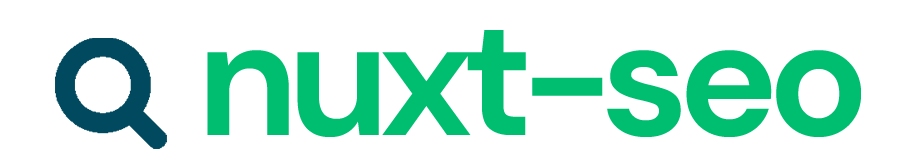
<style>
.page{position:relative;width:913px;height:167px;background:#ffffff}
.page>*{position:absolute;margin:0}
.t1{font:166.7px "DMSans-Bold";letter-spacing:-0.06em;color:#00be70}
</style>
<div class="page">
<p class="t1" style="left:207px;top:30px;width:654px;height:107px">nuxt-seo</p>
</div>
